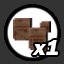
<style>
.page{position:relative;width:64px;height:64px;background:#333333}
.page>*{position:absolute;margin:0}
.t1{font:22px "FranklinGothic-Heavy";color:#ffffff;font-style:italic}
</style>
<div class="page">
<p class="t1" style="left:32px;top:40px;width:26px;height:15px">x1</p>
</div>
